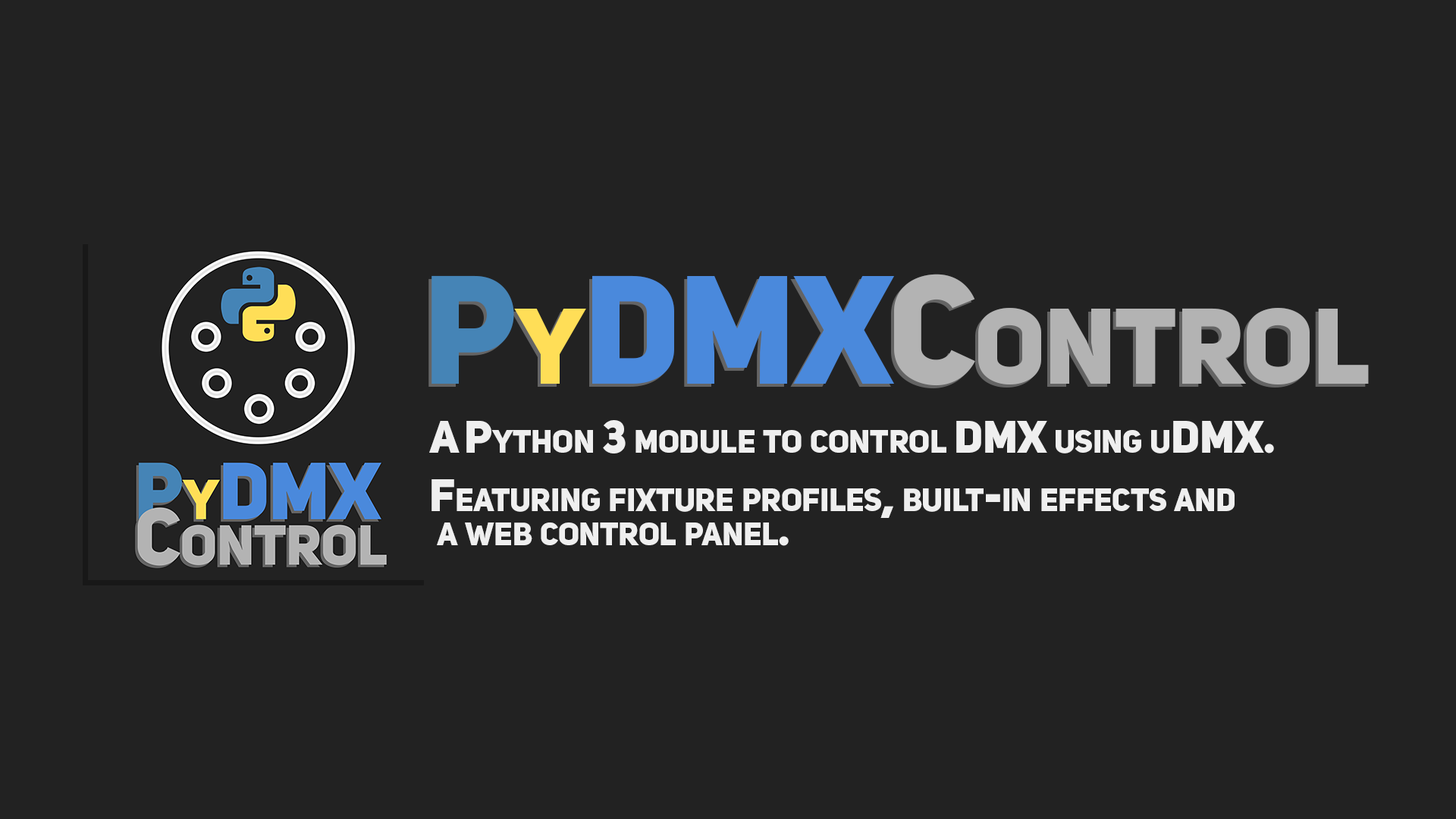
<style>
.page{position:relative;width:1456px;height:819px;background:#222222}
.page>*{position:absolute;margin:0}
.t1{font:151.7px "UniSansHeavyCAPS";letter-spacing:-0.01em;color:#b3b3b3;font-variant:small-caps}
.t2{font:151.7px "UniSansHeavyCAPS";letter-spacing:-0.01em;color:#4584b6;font-variant:small-caps}
.t3{font:151.7px "UniSansHeavyCAPS";letter-spacing:-0.01em;color:#ffde57;font-variant:small-caps}
.t4{font:151.7px "UniSansHeavyCAPS";letter-spacing:-0.01em;color:#4a89dc;font-variant:small-caps}
.t5{font:45.5px "UniSansHeavyCAPS";letter-spacing:-0.01em;color:#efefef;font-variant:small-caps}
.t6{font:45.5px/34.1px "UniSansHeavyCAPS";letter-spacing:-0.01em;color:#efefef;font-variant:small-caps}
</style>
<div class="page">
<p class="t1" style="left:431px;top:274px;width:938px;height:112px"><span class="t2">P</span><span class="t3">y</span><span class="t4">DMX</span>Control</p>
<p class="t5" style="left:429px;top:420px;width:845px;height:33px">A Python 3 module to control DMX using uDMX.</p>
<p class="t6" style="left:431px;top:479px;width:804px;height:67px">Featuring fixture profiles, built-in effects and<br> a web control panel.</p>
</div>
